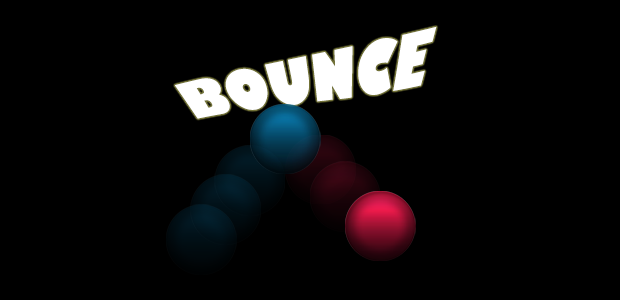
<style>
.page{position:relative;width:620px;height:300px;background:#000000}
.page>*{position:absolute;margin:0}
.t1{font:61.5px "GillSans-UltraBold";color:#ffffff;text-transform:uppercase;scale:0.8 1}
</style>
<div class="page">
<p class="t1" style="left:175px;top:26px;width:262px;height:93px;rotate:-10deg">Bounce</p>
</div>
